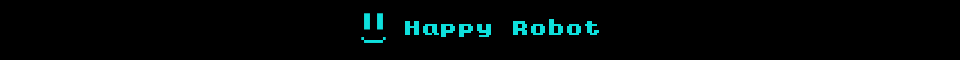
<style>
.page{position:relative;width:960px;height:60px;background:#000000}
.page>*{position:absolute;margin:0}
.t1{font:18px "KongtextRegular";color:#0ee0dd}
</style>
<div class="page">
<p class="t1" style="left:405px;top:19px;width:194px;height:18px">Happy Robot</p>
</div>
